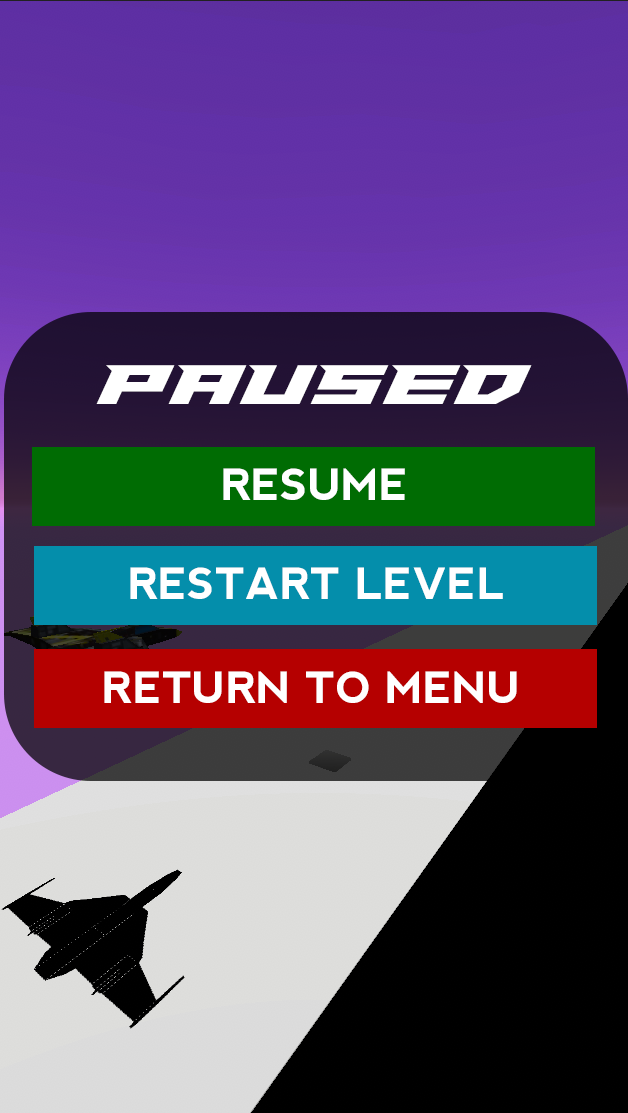
<style>
.page{position:relative;width:628px;height:1113px}
.page>*{position:absolute;margin:0}
.t1{font:60px "PaladinsExpanded";color:#ffffff}
.t2{font:43px "nevis-Bold";color:#ffffff}
</style>
<div class="page">
<p class="t1" style="left:96px;top:365px;width:436px;height:39px">PAUSED</p>
<p class="t2" style="left:223px;top:468px;width:182px;height:32px">RESUME</p>
<p class="t2" style="left:130px;top:567px;width:373px;height:32px">RESTART LEVEL</p>
<p class="t2" style="left:104px;top:671px;width:413px;height:32px">RETURN TO MENU</p>
</div>
